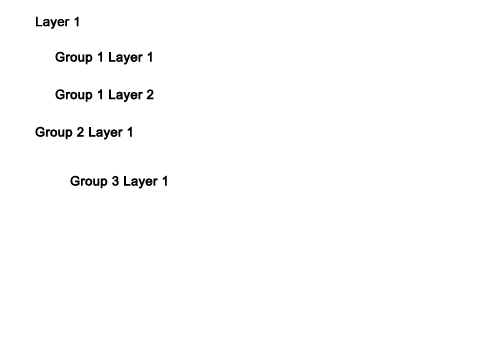
<style>
.page{position:relative;width:504px;height:360px;background:#ffffff}
.page>*{position:absolute;margin:0}
.t1{font:13px "ArialMT";color:#000000;font-weight:bold}
</style>
<div class="page">
<p class="t1" style="left:36px;top:16px;width:43px;height:13px">Layer 1</p>
<p class="t1" style="left:55px;top:51px;width:97px;height:14px">Group 1 Layer 1</p>
<p class="t1" style="left:55px;top:89px;width:99px;height:13px">Group 1 Layer 2</p>
<p class="t1" style="left:35px;top:126px;width:97px;height:14px">Group 2 Layer 1</p>
<p class="t1" style="left:70px;top:175px;width:97px;height:14px">Group 3 Layer 1</p>
</div>
